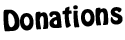
<style>
.page{position:relative;width:125px;height:40px;background:#ffffff}
.page>*{position:absolute;margin:0}
.t1{font:25.2px "HoboStd";color:#000000;font-weight:bold}
</style>
<div class="page">
<p class="t1" style="left:3px;top:5px;width:120px;height:27px;rotate:-4deg">Donations</p>
</div>
